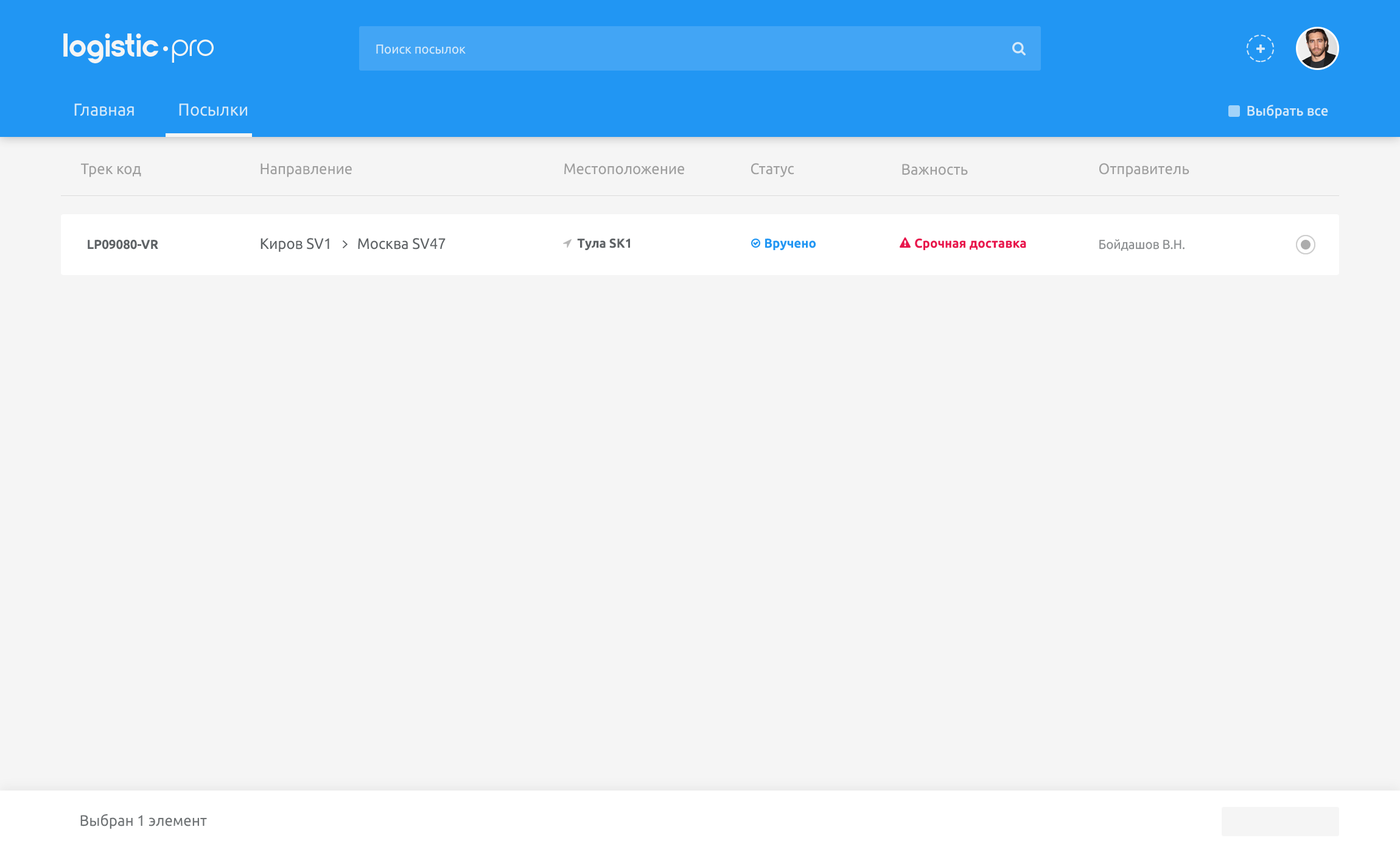
<style>
.page{position:relative;width:1400px;height:852px;background:#f5f5f5}
.page>*{position:absolute;margin:0}
.t1{font:32.5px "NordiquePro-Bold";color:#f5f5f5;scale:0.96 1}
.t2{font:32.5px "NordiquePro-Regular";color:#f5f5f5;scale:0.96 1}
.t3{font:13px "Ubuntu-Regular";color:#d6e9f9;scale:0.96 1}
.t4{font:17.3px "Ubuntu-Regular";color:#d6e9f9;scale:0.96 1}
.t5{font:14.1px "Ubuntu-Medium";color:#d6e9f9;scale:0.96 1}
.t6{font:15.1px "Ubuntu-Regular";color:#9e9e9e;scale:0.96 1}
.t7{font:13px "Ubuntu-Bold";color:#5e6265;scale:0.96 1}
.t8{font:15.1px "Ubuntu-Regular";color:#5e6265;scale:0.96 1}
.t9{font:7.3px "Ubuntu-Bold";color:#5e6265;scale:0.96 1}
.t10{font:7.3px "Ubuntu-Bold";color:#2196f3;scale:0.96 1}
.t11{font:7.3px "Ubuntu-Bold";color:#e8164c;scale:0.96 1}
.t12{font:7.3px "Ubuntu-Regular";color:#898c8e;scale:0.96 1}
.t13{font:15.1px "Ubuntu-Regular";color:#6e7274;scale:0.96 1}
</style>
<div class="page">
<p class="t1" style="left:63px;top:33px;width:96px;height:30px">logistic</p>
<p class="t2" style="left:172px;top:40px;width:42px;height:23px">pro</p>
<p class="t3" style="left:376px;top:44px;width:90px;height:10px">Поиск посылок</p>
<p class="t4" style="left:74px;top:103px;width:60px;height:13px">Главная</p>
<p class="t4" style="left:179px;top:103px;width:68px;height:13px">Посылки</p>
<p class="t5" style="left:1247px;top:105px;width:81px;height:14px">Выбрать все</p>
<p class="t6" style="left:81px;top:163px;width:60px;height:14px">Трек код</p>
<p class="t6" style="left:260px;top:163px;width:92px;height:14px">Направление</p>
<p class="t6" style="left:564px;top:163px;width:120px;height:12px">Местоположение</p>
<p class="t6" style="left:751px;top:163px;width:43px;height:14px">Статус</p>
<p class="t6" style="left:902px;top:164px;width:66px;height:11px">Важность</p>
<p class="t6" style="left:1099px;top:163px;width:90px;height:14px">Отправитель</p>
<p class="t7" style="left:88px;top:240px;width:70px;height:10px">LP09080-VR</p>
<p class="t8" style="left:260px;top:238px;width:69px;height:14px">Киров SV1</p>
<p class="t8" style="left:358px;top:238px;width:87px;height:12px">Москва SV47</p>
<p class="t9" style="left:577px;top:239px;width:53px;height:11px">Тула SK1</p>
<p class="t10" style="left:765px;top:239px;width:50px;height:11px">Вручено</p>
<p class="t11" style="left:915px;top:239px;width:111px;height:11px">Срочная доставка</p>
<p class="t12" style="left:1099px;top:239px;width:85px;height:12px">Бойдашов В.Н.</p>
<p class="t13" style="left:80px;top:814px;width:127px;height:15px">Выбран 1 элемент</p>
</div>
